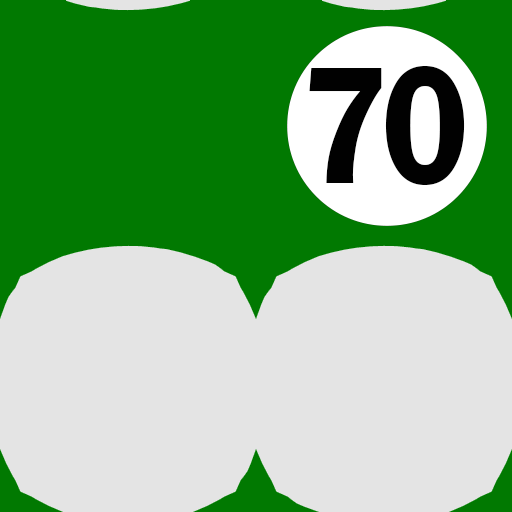
<style>
.page{position:relative;width:512px;height:512px;background:#e4e4e4}
.page>*{position:absolute;margin:0}
.t1{font:172.5px "FranklinGothic-Demi";letter-spacing:-0.05em;color:#010101;scale:0.87 1}
</style>
<div class="page">
<p class="t1" style="left:309px;top:66px;width:156px;height:119px">70</p>
</div>
